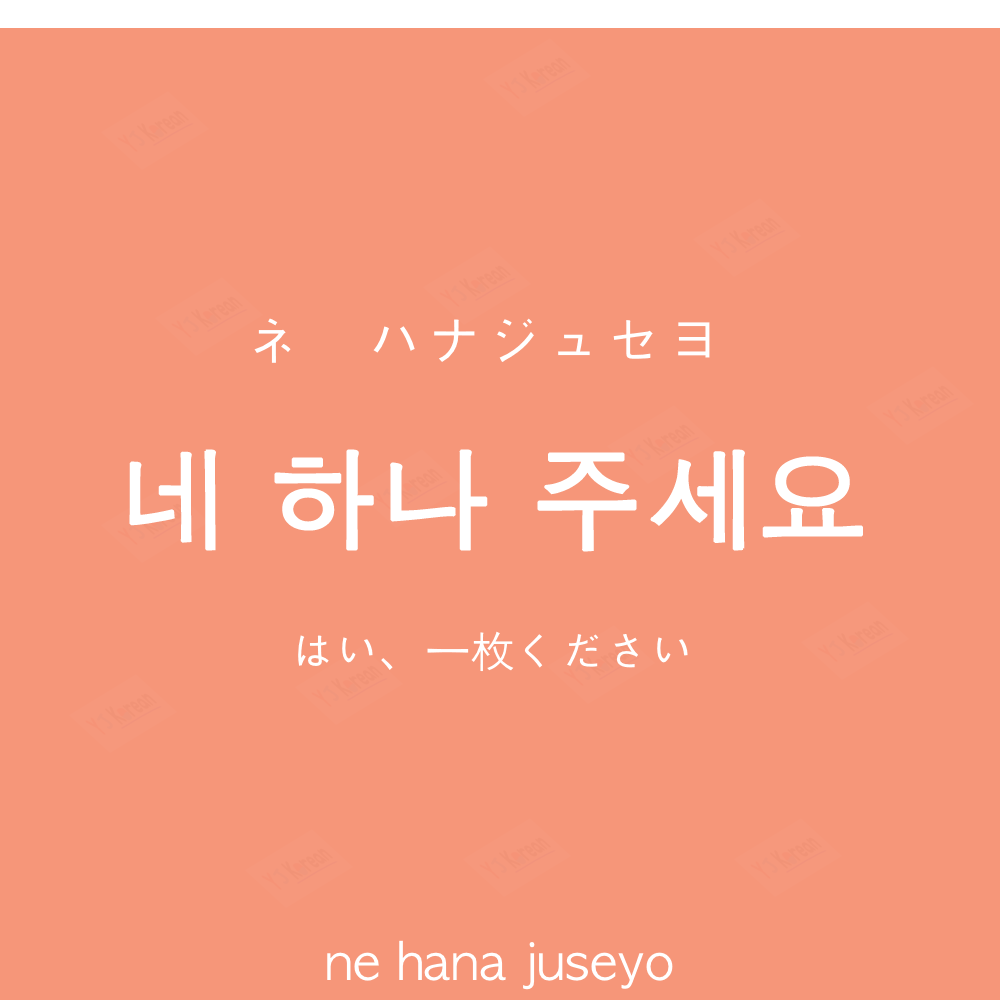
<style>
.page{position:relative;width:1000px;height:1000px;background:#f69679}
.page>*{position:absolute;margin:0}
.t1{font:60px "AppleGothic";color:#ffffff}
.t2{font:110px "AppleGothic";color:#ffffff;font-weight:bold}
.t3{font:45px "AppleGothic";color:#ffffff}
.t4{font:50px "AppleGothic";color:#ffffff}
</style>
<div class="page">
<p class="t1" style="left:254px;top:318px;width:456px;height:45px">ネ　ハナジュセヨ</p>
<p class="t2" style="left:129px;top:449px;width:734px;height:103px">네 하나 주세요</p>
<p class="t3" style="left:298px;top:631px;width:390px;height:41px">はい、一枚ください</p>
<p class="t4" style="left:327px;top:940px;width:346px;height:50px">ne hana juseyo</p>
</div>
